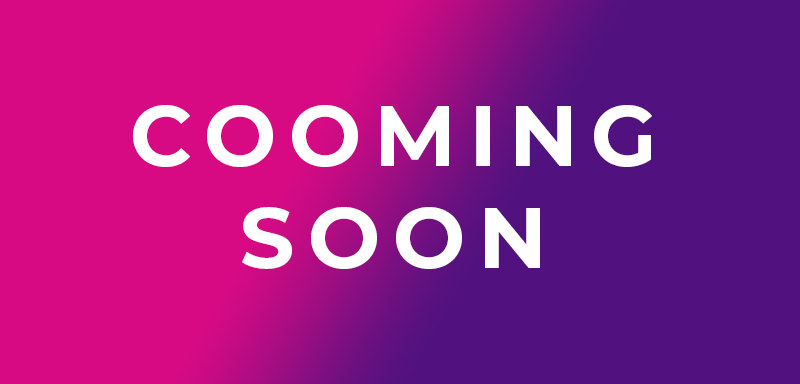
<style>
.page{position:relative;width:800px;height:384px;background:#51127f}
.page>*{position:absolute;margin:0}
.t1{font:85.5px "Montserrat-Bold";letter-spacing:0.15em;color:#ffffff}
</style>
<div class="page">
<p class="t1" style="left:133px;top:105px;width:519px;height:164px;text-align:center">COOMING<br>SOON</p>
</div>
